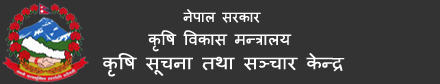
<style>
.page{position:relative;width:440px;height:84px;background:#333333}
.page>*{position:absolute;margin:0}
.t1{font:14px "Mangal";color:#ffffff}
.t2{font:16px "Mangal";color:#ffffff}
.t3{font:17.7px "Mangal";color:#ffffff;scale:1.11 1}
</style>
<div class="page">
<p class="t1" style="left:183px;top:9px;width:78px;height:14px">नेपाल सरकार</p>
<p class="t2" style="left:148px;top:30px;width:144px;height:22px">कृषि विकास मन्त्रालय</p>
<p class="t3" style="left:102px;top:53px;width:243px;height:24px">कृषि सूचना तथा सञ्चार केन्द्र</p>
</div>
